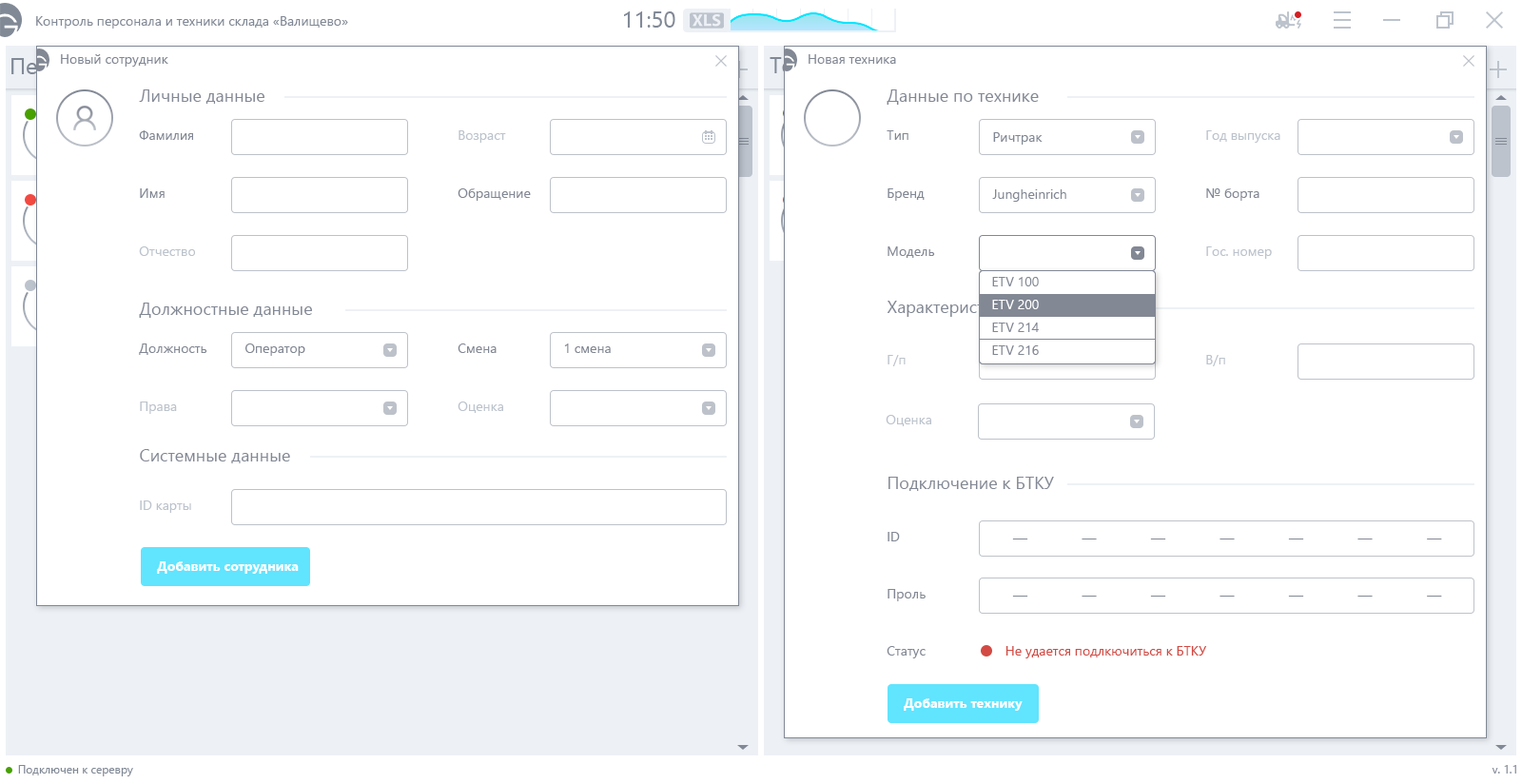
<style>
.page{position:relative;width:1522px;height:784px;background:#ffffff}
.page>*{position:absolute;margin:0}
.t1{font:13.3px "SegoeUI";color:#828894}
.t2{font:17.1px "SegoeUI";color:#828894}
.t3{font:13.3px "SegoeUI";color:#bcc3cc}
.t4{font:14.3px "SegoeUI";color:#828894}
.t5{font:13.3px "SegoeUI-Bold";color:#ffffff}
.t6{font:13.3px "SegoeUI";color:#d24a43}
</style>
<div class="page">
<p class="t1" style="left:61px;top:54px;width:107px;height:13px">Новый сотрудник</p>
<p class="t1" style="left:808px;top:54px;width:88px;height:10px">Новая техника</p>
<p class="t2" style="left:139px;top:89px;width:125px;height:15px">Личные данные</p>
<p class="t2" style="left:886px;top:89px;width:153px;height:16px">Данные по технике</p>
<p class="t1" style="left:139px;top:130px;width:54px;height:10px">Фамилия</p>
<p class="t3" style="left:458px;top:130px;width:48px;height:13px">Возраст</p>
<p class="t1" style="left:886px;top:130px;width:22px;height:10px">Тип</p>
<p class="t1" style="left:993px;top:132px;width:49px;height:13px">Ричтрак</p>
<p class="t3" style="left:1206px;top:130px;width:74px;height:13px">Год выпуска</p>
<p class="t1" style="left:140px;top:188px;width:25px;height:10px">Имя</p>
<p class="t1" style="left:457px;top:188px;width:74px;height:13px">Обращение</p>
<p class="t1" style="left:887px;top:188px;width:37px;height:13px">Бренд</p>
<p class="t1" style="left:992px;top:189px;width:74px;height:13px">Jungheinrich</p>
<p class="t1" style="left:1206px;top:188px;width:53px;height:13px">№ борта</p>
<p class="t3" style="left:139px;top:246px;width:56px;height:10px">Отчество</p>
<p class="t1" style="left:887px;top:246px;width:48px;height:12px">Модель</p>
<p class="t3" style="left:1206px;top:246px;width:66px;height:13px">Гос. номер</p>
<p class="t2" style="left:139px;top:302px;width:173px;height:16px">Должностные данные</p>
<p class="t2" style="left:886px;top:301px;width:126px;height:16px">Характеристики</p>
<p class="t1" style="left:139px;top:343px;width:68px;height:12px">Должность</p>
<p class="t1" style="left:245px;top:343px;width:60px;height:13px">Оператор</p>
<p class="t1" style="left:457px;top:343px;width:39px;height:10px">Смена</p>
<p class="t1" style="left:564px;top:343px;width:47px;height:10px">1 смена</p>
<p class="t3" style="left:887px;top:355px;width:18px;height:11px">Г/п</p>
<p class="t3" style="left:1206px;top:355px;width:19px;height:11px">В/п</p>
<p class="t3" style="left:140px;top:401px;width:37px;height:13px">Права</p>
<p class="t3" style="left:457px;top:401px;width:46px;height:12px">Оценка</p>
<p class="t3" style="left:885px;top:415px;width:46px;height:11px">Оценка</p>
<p class="t2" style="left:140px;top:449px;width:150px;height:14px">Системные данные</p>
<p class="t2" style="left:888px;top:476px;width:166px;height:15px">Подключение к БТКУ</p>
<p class="t3" style="left:140px;top:500px;width:51px;height:13px">ID карты</p>
<p class="t1" style="left:887px;top:532px;width:13px;height:9px">ID</p>
<p class="t4" style="left:1012px;top:538px;width:430px;height:1px">—              —              —              —              —              —              —</p>
<p class="t5" style="left:157px;top:561px;width:142px;height:12px">Добавить сотрудника</p>
<p class="t1" style="left:887px;top:589px;width:38px;height:12px">Проль</p>
<p class="t4" style="left:1012px;top:595px;width:430px;height:1px">—              —              —              —              —              —              —</p>
<p class="t1" style="left:886px;top:646px;width:39px;height:12px">Статус</p>
<p class="t6" style="left:1005px;top:646px;width:201px;height:12px">Не удается подлкючиться к БТКУ</p>
<p class="t5" style="left:903px;top:698px;width:119px;height:12px">Добавить технику</p>
</div>
